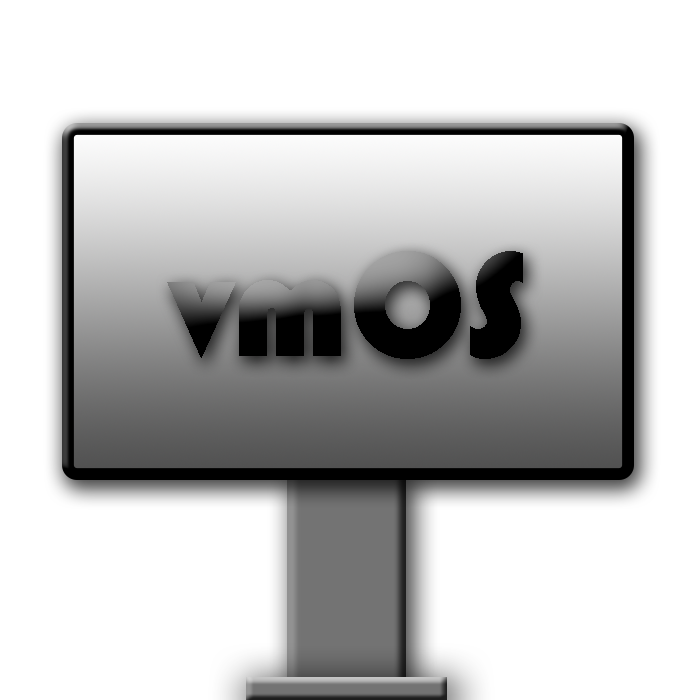
<style>
.page{position:relative;width:700px;height:700px;background:#ffffff}
.page>*{position:absolute;margin:0}
.t1{font:153px "Bauhaus93"}
</style>
<div class="page">
<p class="t1" style="left:167px;top:251px;width:356px;height:108px">vmOS</p>
</div>
